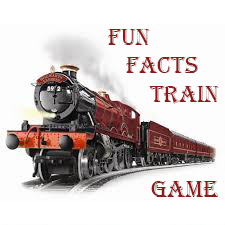
<style>
.page{position:relative;width:225px;height:225px;background:#fdfdfd}
.page>*{position:absolute;margin:0}
.t1{font:24px "Algerian";color:#8a1b1b}
</style>
<div class="page">
<p class="t1" style="left:108px;top:29px;width:111px;height:75px">Fun<br>   Facts<br>  Train</p>
<p class="t1" style="left:151px;top:181px;width:68px;height:16px">Game</p>
</div>
